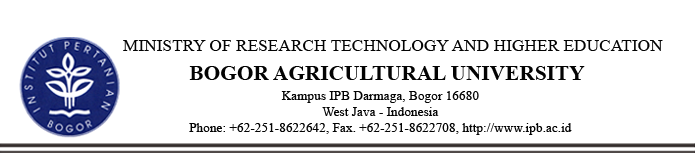
<style>
.page{position:relative;width:696px;height:162px;background:#ffffff}
.page>*{position:absolute;margin:0}
.t1{font:17.3px "TimesNewRomanPSMT";color:#030303}
.t2{font:21.3px "TimesNewRomanPS-BoldMT";color:#030303}
.t3{font:13.3px/16px "TimesNewRomanPSMT";color:#030303}
</style>
<div class="page">
<p class="t1" style="left:123px;top:40px;width:540px;height:11px">MINISTRY OF RESEARCH TECHNOLOGY AND HIGHER EDUCATION</p>
<p class="t2" style="left:189px;top:66px;width:396px;height:14px">BOGOR AGRICULTURAL UNIVERSITY</p>
<p class="t3" style="left:189px;top:91px;width:383px;height:44px;text-align:center">Kampus IPB Darmaga, Bogor 16680<br>West Java - Indonesia<br>Phone: +62-251-8622642, Fax. +62-251-8622708, http://www.ipb.ac.id</p>
</div>
